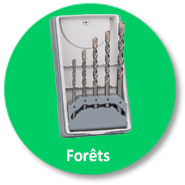
<style>
.page{position:relative;width:185px;height:185px;background:#00cc66}
.page>*{position:absolute;margin:0}
.t1{font:17.8px "Calibri-Bold";color:#ffffff;scale:0.96 1}
</style>
<div class="page">
<p class="t1" style="left:67px;top:148px;width:43px;height:14px">Forêts</p>
</div>
